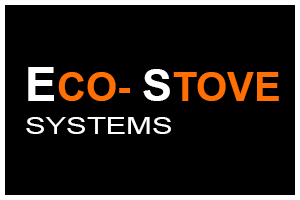
<style>
.page{position:relative;width:300px;height:200px;background:#000000}
.page>*{position:absolute;margin:0}
.t1{font:40px "Arial-BoldMT";color:#ff6f04}
.t2{font:47px "Arial-BoldMT";color:#ffffff}
.t3{font:45px "Arial-BoldMT";color:#ffffff}
.t4{font:23px "ArialMT";color:#ffffff;scale:1.34 1}
</style>
<div class="page">
<p class="t1" style="left:28px;top:67px;width:251px;height:34px"><span class="t2">E</span>CO- <span class="t3">S</span>TOVE</p>
<p class="t4" style="left:26px;top:117px;width:145px;height:17px">SYSTEMS</p>
</div>
